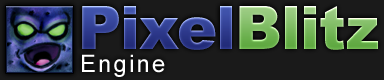
<style>
.page{position:relative;width:384px;height:80px;background:#1a1a1a}
.page>*{position:absolute;margin:0}
.t1{font:60px "Arial-Black"}
.t2{font:24px "ArialMT";letter-spacing:0.1em;color:#ffffff}
</style>
<div class="page">
<p class="t1" style="left:82px;top:6px;width:296px;height:44px">PixelBlitz</p>
<p class="t2" style="left:82px;top:54px;width:83px;height:23px">Engine</p>
</div>
